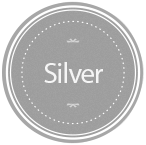
<style>
.page{position:relative;width:146px;height:145px;background:#ffffff}
.page>*{position:absolute;margin:0}
.t1{font:29px "MyriadPro-Regular";letter-spacing:-0.04em;color:#f5f5f5}
</style>
<div class="page">
<p class="t1" style="left:44px;top:62px;width:59px;height:21px">Silver</p>
</div>
